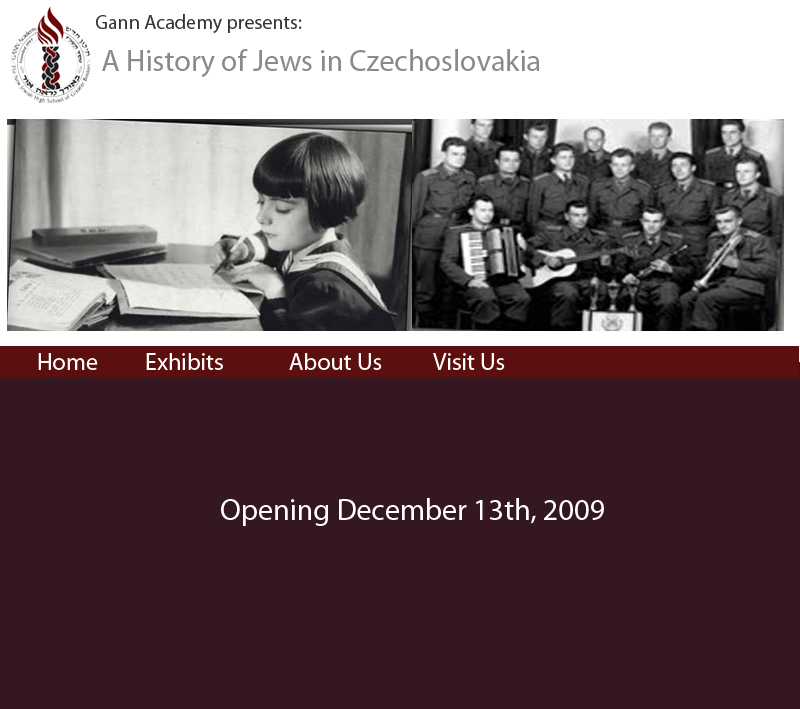
<style>
.page{position:relative;width:800px;height:709px;background:#341721}
.page>*{position:absolute;margin:0}
.t1{font:30px/21px "MyriadPro-Regular";color:#888a8d}
.t2{font:20px/21px "MyriadPro-Regular";color:#343436}
.t3{font:30px "MyriadPro-Regular";color:#ffffff}
</style>
<div class="page">
<p class="t1" style="left:96px;top:14px;width:444px;height:64px"><span class="t2">Gann Academy presents:<br><br></span> A History of Jews in Czechoslovakia</p>
<p class="t3" style="left:221px;top:498px;width:383px;height:28px">Opening December 13th, 2009</p>
</div>
